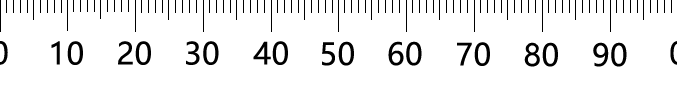
<style>
.page{position:relative;width:677px;height:85px;background:#ffffff}
.page>*{position:absolute;margin:0}
.t1{font:30px "MicrosoftYaHei";letter-spacing:0.015em;color:#000000}
</style>
<div class="page">
<p class="t1" style="left:51px;top:41px;width:32px;height:24px">10</p>
<p class="t1" style="left:118px;top:41px;width:33px;height:24px">20</p>
<p class="t1" style="left:186px;top:41px;width:33px;height:24px">30</p>
<p class="t1" style="left:253px;top:41px;width:35px;height:24px">40</p>
<p class="t1" style="left:322px;top:41px;width:32px;height:25px">50</p>
<p class="t1" style="left:388px;top:41px;width:34px;height:25px">60</p>
<p class="t1" style="left:457px;top:42px;width:33px;height:24px">70</p>
<p class="t1" style="left:524px;top:42px;width:34px;height:25px">80</p>
<p class="t1" style="left:593px;top:42px;width:34px;height:25px">90</p>
</div>
